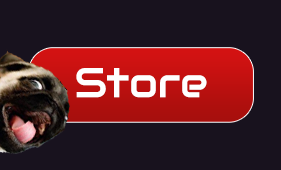
<style>
.page{position:relative;width:281px;height:170px;background:#18121e}
.page>*{position:absolute;margin:0}
.t1{font:41.7px "Audiowide-Regular";color:#ffffff}
</style>
<div class="page">
<p class="t1" style="left:76px;top:68px;width:131px;height:30px">Store</p>
</div>
